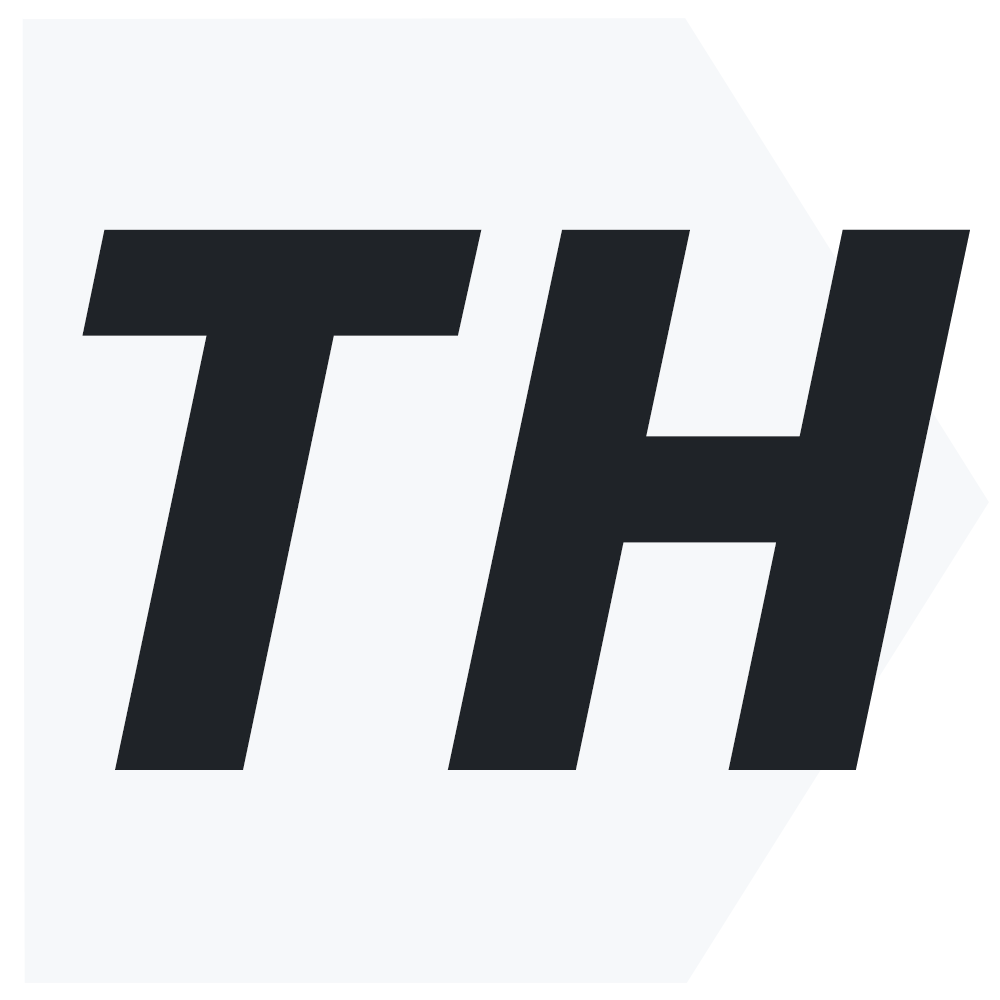
<style>
.page{position:relative;width:1000px;height:1000px;background:#f6f8fa}
.page>*{position:absolute;margin:0}
.t1{font:756.6px "NotoSansItalic-ExtraBoldItalic";color:#1f2328}
</style>
<div class="page">
<p class="t1" style="left:82px;top:229px;width:888px;height:541px">TH</p>
</div>
